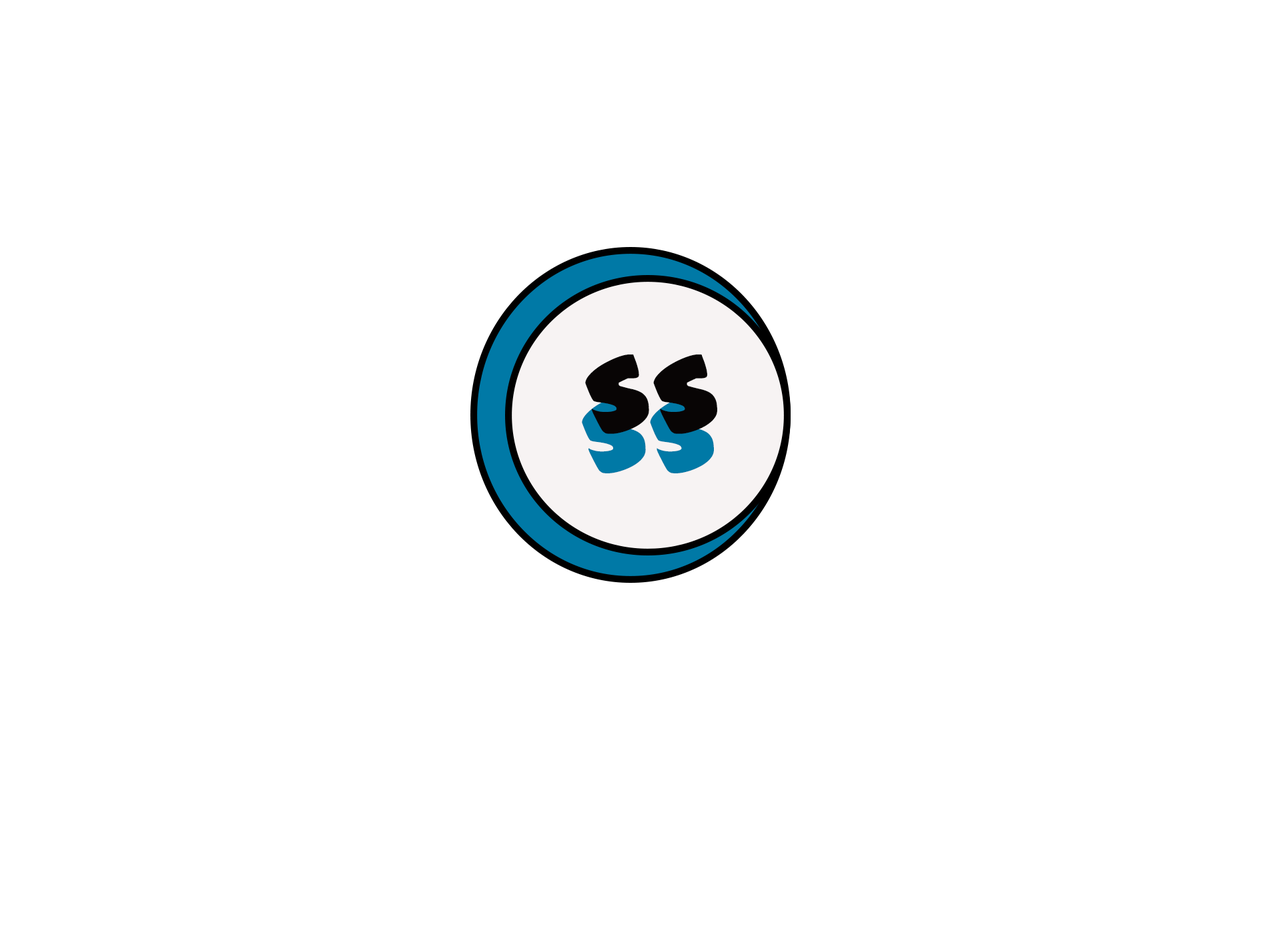
<style>
.page{position:relative;width:1261px;height:946px;background:#ffffff}
.page>*{position:absolute;margin:0}
.t1{font:111.2px "#44Font";color:#080505}
.t2{font:111.2px "#44Font";color:#0079a6}
</style>
<div class="page">
<p class="t1" style="left:585px;top:354px;width:132px;height:80px">SS</p>
<p class="t2" style="left:582px;top:394px;width:132px;height:79px">SS</p>
</div>
